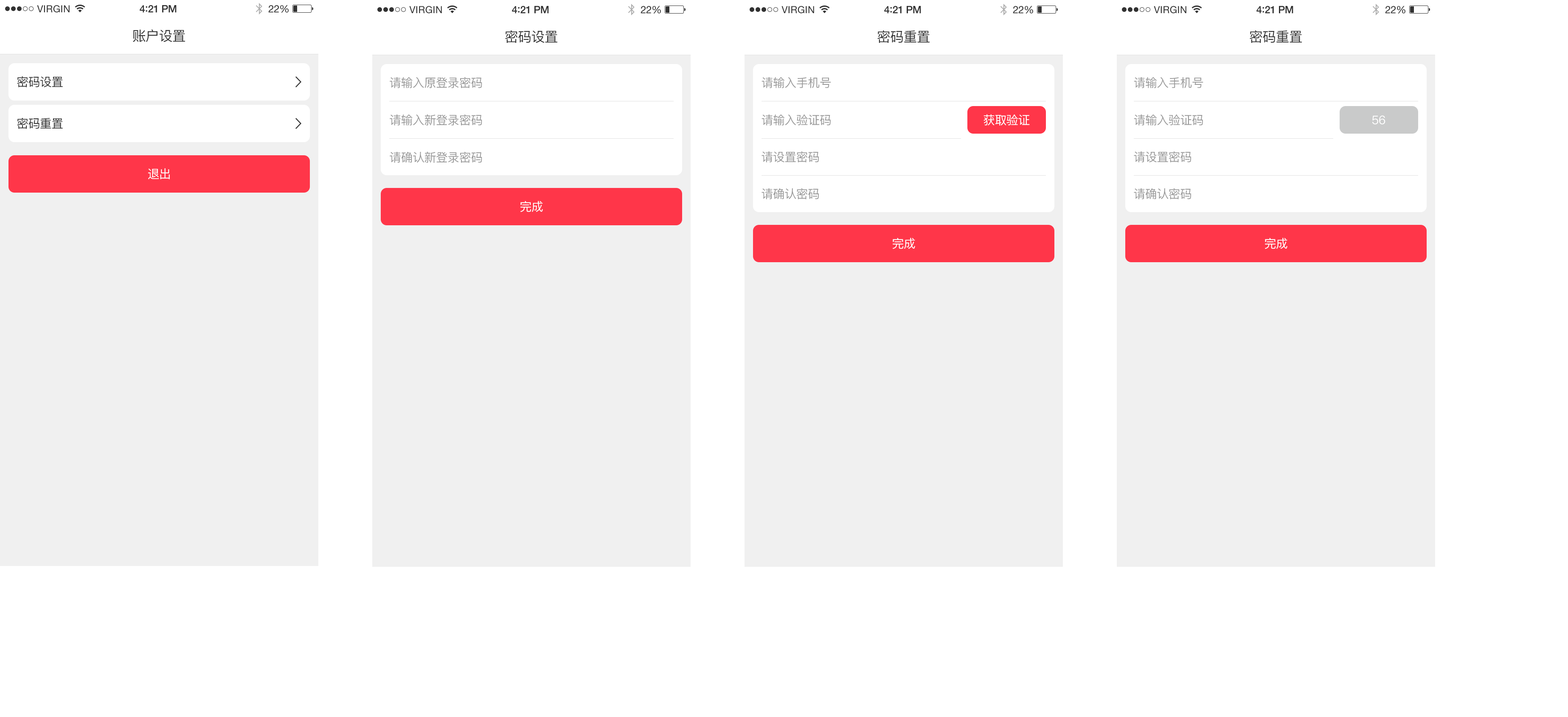
<style>
.page{position:relative;width:1568px;height:717px;background:#ffffff}
.page>*{position:absolute;margin:0}
.t1{font:9.8px "HelveticaNeue";letter-spacing:0.02em;color:#323232}
.t2{font:10.2px "HelveticaNeue-Medium";letter-spacing:-0.02em;color:#323232}
.t3{font:11px "Avenir-Medium";letter-spacing:-0.02em;color:#323232}
.t4{font:10.2px "HelveticaNeue";letter-spacing:-0.02em;color:#323232}
.t5{font:13.6px "PingFang-SC-Medium";letter-spacing:-0.02em;color:#323232}
.t6{font:11.9px "PingFang-SC-Medium";letter-spacing:-0.02em;color:#323232}
.t7{font:11.9px "PingFang-SC-Medium";letter-spacing:-0.02em;color:#999999}
.t8{font:11.9px "PingFang-SC-Medium";letter-spacing:-0.02em;color:#ffffff}
</style>
<div class="page">
<p class="t1" style="left:37px;top:5px;width:33px;height:8px">VIRGIN</p>
<p class="t2" style="left:140px;top:5px;width:37px;height:8px">4<span class="t3">:</span>21 PM</p>
<p class="t4" style="left:268px;top:5px;width:21px;height:8px">22%</p>
<p class="t1" style="left:409px;top:6px;width:33px;height:8px">VIRGIN</p>
<p class="t2" style="left:512px;top:6px;width:37px;height:8px">4<span class="t3">:</span>21 PM</p>
<p class="t4" style="left:641px;top:6px;width:20px;height:8px">22%</p>
<p class="t1" style="left:781px;top:6px;width:33px;height:8px">VIRGIN</p>
<p class="t2" style="left:884px;top:6px;width:37px;height:8px">4<span class="t3">:</span>21 PM</p>
<p class="t4" style="left:1013px;top:6px;width:20px;height:8px">22%</p>
<p class="t1" style="left:1154px;top:6px;width:32px;height:8px">VIRGIN</p>
<p class="t2" style="left:1256px;top:6px;width:37px;height:8px">4<span class="t3">:</span>21 PM</p>
<p class="t4" style="left:1385px;top:6px;width:20px;height:8px">22%</p>
<p class="t5" style="left:133px;top:29px;width:52px;height:13px">账户设置</p>
<p class="t5" style="left:505px;top:30px;width:52px;height:13px">密码设置</p>
<p class="t5" style="left:877px;top:30px;width:53px;height:13px">密码重置</p>
<p class="t5" style="left:1250px;top:30px;width:52px;height:13px">密码重置</p>
<p class="t6" style="left:17px;top:76px;width:46px;height:11px">密码设置</p>
<p class="t7" style="left:390px;top:77px;width:92px;height:11px">请输入原登录密码</p>
<p class="t7" style="left:762px;top:77px;width:69px;height:11px">请输入手机号</p>
<p class="t7" style="left:1134px;top:77px;width:69px;height:11px">请输入手机号</p>
<p class="t6" style="left:17px;top:118px;width:46px;height:11px">密码重置</p>
<p class="t7" style="left:390px;top:114px;width:92px;height:12px">请输入新登录密码</p>
<p class="t7" style="left:762px;top:114px;width:69px;height:12px">请输入验证码</p>
<p class="t8" style="left:984px;top:114px;width:46px;height:12px">获取验证</p>
<p class="t7" style="left:1134px;top:114px;width:69px;height:12px">请输入验证码</p>
<p class="t8" style="left:1372px;top:115px;width:13px;height:10px">56</p>
<p class="t7" style="left:390px;top:152px;width:92px;height:11px">请确认新登录密码</p>
<p class="t7" style="left:762px;top:151px;width:57px;height:12px">请设置密码</p>
<p class="t7" style="left:1134px;top:151px;width:57px;height:12px">请设置密码</p>
<p class="t8" style="left:148px;top:168px;width:22px;height:12px">退出</p>
<p class="t7" style="left:762px;top:188px;width:57px;height:12px">请确认密码</p>
<p class="t7" style="left:1134px;top:188px;width:57px;height:12px">请确认密码</p>
<p class="t8" style="left:520px;top:201px;width:23px;height:11px">完成</p>
<p class="t8" style="left:893px;top:238px;width:22px;height:11px">完成</p>
<p class="t8" style="left:1265px;top:238px;width:22px;height:11px">完成</p>
</div>
